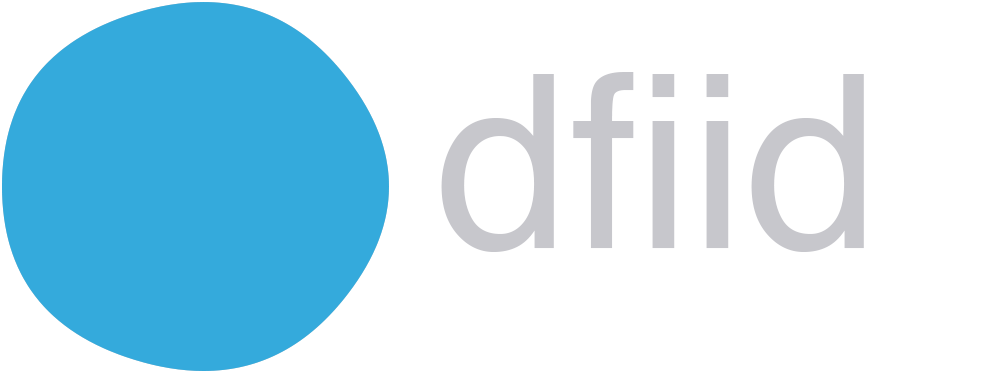
<style>
.page{position:relative;width:990px;height:373px;background:#ffffff}
.page>*{position:absolute;margin:0}
.t1{font:242px "Helvetica";color:#c7c7cc}
</style>
<div class="page">
<p class="t1" style="left:441px;top:72px;width:423px;height:180px">dfiid</p>
</div>
